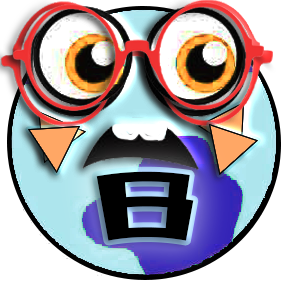
<style>
.page{position:relative;width:291px;height:291px;background:#ffffff}
.page>*{position:absolute;margin:0}
.t1{font:94px "ROGFonts-Regular";color:#000000}
</style>
<div class="page">
<p class="t1" style="left:96px;top:171px;width:98px;height:70px">B</p>
</div>
